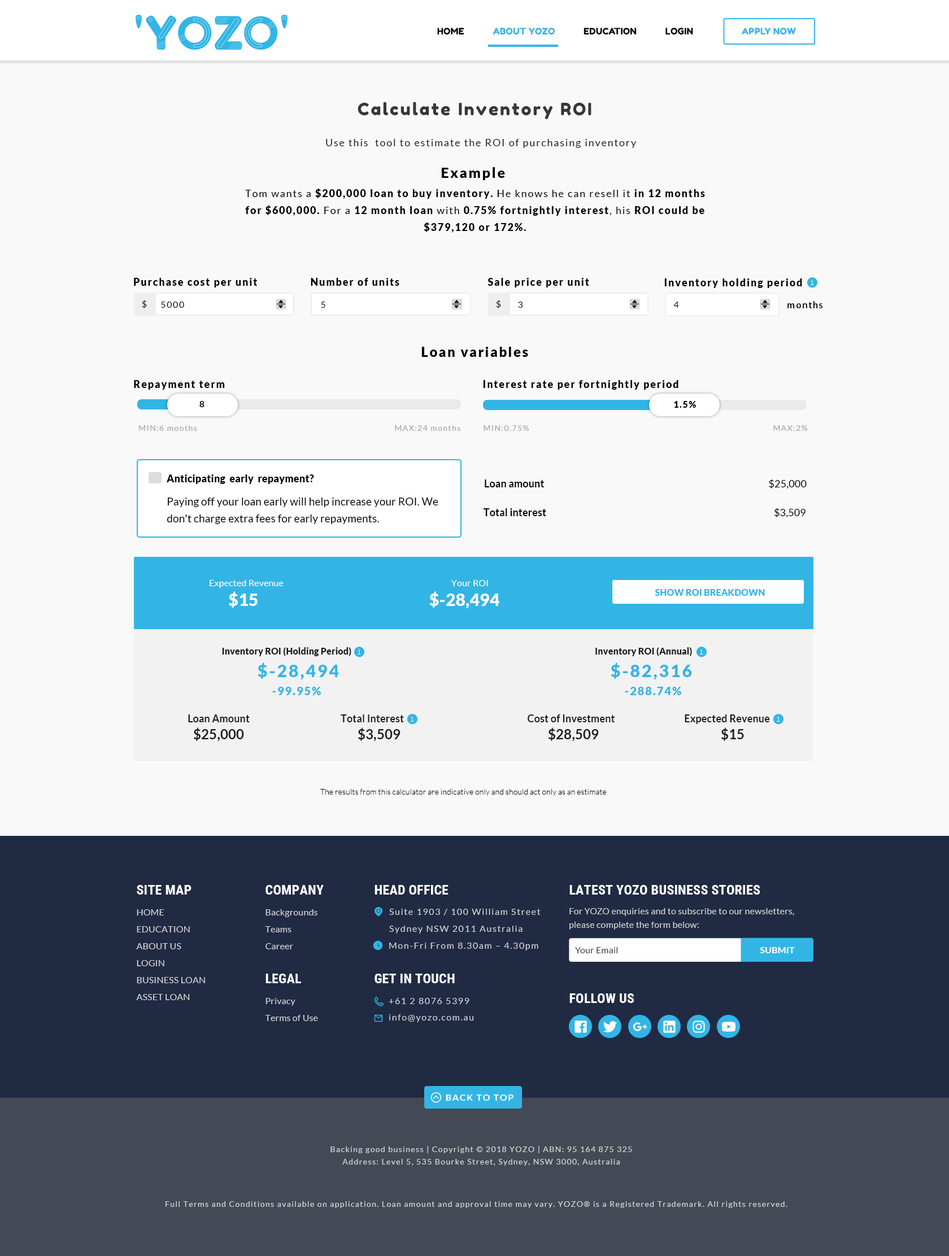
<style>
.page{position:relative;width:949px;height:1256px;background:#f9f9f9}
.page>*{position:absolute;margin:0}
.t1{font:9px "FredokaOne-Regular";letter-spacing:0.01em;color:#000000}
.t2{font:9px "FredokaOne-Regular";letter-spacing:0.01em;color:#32b5e5}
.t3{font:16.9px "FredokaOne-Regular";letter-spacing:0.1em;color:#373737}
.t4{font:10.2px "Lato-Regular";letter-spacing:0.1em;color:#1c1c1c}
.t5{font:14.1px "Lato-Black";letter-spacing:0.1em;color:#000000}
.t6{font:10.2px/16.9px "Lato-Black";letter-spacing:0.1em;color:#000000}
.t7{font:10.2px/16.9px "Lato-Regular";letter-spacing:0.1em;color:#000000}
.t8{font:10.2px "Lato-Black";letter-spacing:0.1em;color:#000000}
.t9{font:9px "Lato-Regular";letter-spacing:0.1em;color:#000000}
.t10{font:9px "AdobeHeitiStd-Regular";letter-spacing:0.1em;color:#000000}
.t11{font:13.6px "Lato-Black";letter-spacing:0.1em;color:#000000}
.t12{font:9px "Lato-Bold";letter-spacing:0.1em;color:#000000}
.t13{font:9px "Lato-Black";letter-spacing:0.1em;color:#000000}
.t14{font:7.9px "Lato-Regular";letter-spacing:0.1em;color:#a6a6a6}
.t15{font:10.2px "Lato-Black";letter-spacing:0.008em;color:#000000}
.t16{font:10.2px "Lato-Bold";letter-spacing:0.008em;color:#000000}
.t17{font:10.2px "Lato-Regular";letter-spacing:0.008em;color:#000000}
.t18{font:10.7px/16.9px "Lato-Regular";letter-spacing:0.008em;color:#000000}
.t19{font:9px "Lato-Regular";letter-spacing:0.008em;color:#ffffff}
.t20{font:16.9px "Lato-Black";letter-spacing:0.008em;color:#ffffff}
.t21{font:9px "Lato-Black";letter-spacing:0.008em;color:#32b5e5}
.t22{font:9px "Lato-Black";letter-spacing:0.008em;color:#1c1c1c}
.t23{font:16.9px "Lato-Black";letter-spacing:0.1em;color:#32b5e5}
.t24{font:11.3px "Lato-Black";letter-spacing:0.1em;color:#32b5e5}
.t25{font:10.2px "Lato-Bold";letter-spacing:0.008em;color:#1c1c1c}
.t26{font:13.6px "Lato-Bold";letter-spacing:0.008em;color:#1c1c1c}
.t27{font:7.9px "Lato-Light";letter-spacing:0.008em;color:#000000}
.t28{font:13.6px "RobotoCondensed-Bold";letter-spacing:0.01em;color:#ffffff}
.t29{font:13.6px "RobotoCondensed-Bold";letter-spacing:0.01em;color:#fffefe}
.t30{font:9px/16.9px "Lato-Regular";letter-spacing:0.01em;color:#d0d0d0}
.t31{font:9px/16.9px "Lato-Regular";letter-spacing:0.1em;color:#d0d0d0}
.t32{font:9px/13.6px "Lato-Regular";letter-spacing:0.01em;color:#d0d0d0}
.t33{font:9px "Lato-Regular";letter-spacing:0.1em;color:#d0d0d0}
.t34{font:9px "Lato-Regular";letter-spacing:0.01em;color:#414141}
.t35{font:9px "Lato-Bold";letter-spacing:0.01em;color:#ffffff}
.t36{font:9px "Lato-Bold";letter-spacing:0.1em;color:#ffffff}
.t37{font:7.9px/12.4px "Lato-Regular";letter-spacing:0.1em;color:#d0d0d0}
.t38{font:7.9px "Lato-Regular";letter-spacing:0.1em;color:#d0d0d0}
</style>
<div class="page">
<p class="t1" style="left:437px;top:28px;width:256px;height:7px">HOME            <span class="t2">ABOUT YOZO    </span>        EDUCATION            LOGIN</p>
<p class="t2" style="left:742px;top:28px;width:54px;height:7px">APPLY NOW</p>
<p class="t3" style="left:358px;top:102px;width:233px;height:17px">Calculate Inventory ROI</p>
<p class="t4" style="left:326px;top:139px;width:310px;height:9px">Use this  tool to estimate the ROI of purchasing inventory</p>
<p class="t5" style="left:442px;top:167px;width:63px;height:13px">Example</p>
<p class="t6" style="left:245px;top:188px;width:460px;height:45px;text-align:center"><span class="t7">Tom wants a </span>$200,000 loan to buy inventory.<span class="t7"> He knows he can resell it </span>in 12 months<br>for $600,000. <span class="t7">For a </span>12 month loan<span class="t7"> with </span>0.75% fortnightly interest<span class="t7">, his </span>ROI could be<br>$379,120 or 172%.</p>
<p class="t8" style="left:134px;top:278px;width:124px;height:10px">Purchase cost per unit</p>
<p class="t8" style="left:311px;top:278px;width:88px;height:8px">Number of units</p>
<p class="t8" style="left:488px;top:278px;width:101px;height:10px">Sale price per unit</p>
<p class="t8" style="left:664px;top:279px;width:138px;height:9px">Inventory holding period</p>
<p class="t9" style="left:142px;top:300px;width:5px;height:8px">$</p>
<p class="t9" style="left:161px;top:302px;width:23px;height:6px">5000</p>
<p class="t9" style="left:321px;top:302px;width:4px;height:6px">5</p>
<p class="t9" style="left:496px;top:300px;width:5px;height:8px">$</p>
<p class="t9" style="left:518px;top:302px;width:5px;height:6px">3</p>
<p class="t9" style="left:673px;top:302px;width:6px;height:6px">4</p>
<p class="t10" style="left:788px;top:301px;width:35px;height:7px">months</p>
<p class="t11" style="left:421px;top:347px;width:107px;height:10px">Loan variables</p>
<p class="t8" style="left:134px;top:380px;width:91px;height:10px">Repayment term</p>
<p class="t8" style="left:483px;top:380px;width:195px;height:10px">Interest rate per fortnightly period</p>
<p class="t12" style="left:199px;top:401px;width:6px;height:6px">8</p>
<p class="t13" style="left:674px;top:401px;width:22px;height:7px">1.5%</p>
<p class="t14" style="left:139px;top:425px;width:58px;height:6px">MIN:6 months</p>
<p class="t14" style="left:395px;top:425px;width:65px;height:6px">MAX:24 months</p>
<p class="t14" style="left:484px;top:425px;width:45px;height:6px">MIN:0.75%</p>
<p class="t14" style="left:773px;top:425px;width:35px;height:6px">MAX:2%</p>
<p class="t15" style="left:167px;top:475px;width:147px;height:9px">Anticipating  early  repayment?</p>
<p class="t16" style="left:485px;top:480px;width:59px;height:8px">Loan amount</p>
<p class="t17" style="left:769px;top:480px;width:38px;height:9px">$25,000</p>
<p class="t18" style="left:167px;top:498px;width:271px;height:26px">Paying off your loan early will help increase your ROI. We<br>don't charge extra fees for early repayments.</p>
<p class="t16" style="left:484px;top:508px;width:62px;height:8px">Total interest</p>
<p class="t17" style="left:775px;top:508px;width:31px;height:10px">$3,509</p>
<p class="t19" style="left:210px;top:580px;width:74px;height:8px">Expected Revenue</p>
<p class="t19" style="left:451px;top:580px;width:37px;height:6px">Your ROI</p>
<p class="t20" style="left:229px;top:591px;width:29px;height:17px">$15</p>
<p class="t20" style="left:429px;top:591px;width:70px;height:18px">$-28,494</p>
<p class="t21" style="left:655px;top:589px;width:110px;height:7px">SHOW ROI BREAKDOWN</p>
<p class="t22" style="left:222px;top:647px;width:129px;height:9px">Inventory ROI (Holding Period)</p>
<p class="t22" style="left:595px;top:647px;width:97px;height:9px">Inventory ROI (Annual)</p>
<p class="t23" style="left:258px;top:663px;width:81px;height:17px">$-28,494</p>
<p class="t23" style="left:611px;top:663px;width:81px;height:17px">$-82,316</p>
<p class="t24" style="left:272px;top:687px;width:49px;height:8px">-99.95%</p>
<p class="t24" style="left:625px;top:687px;width:56px;height:8px">-288.74%</p>
<p class="t25" style="left:188px;top:715px;width:62px;height:8px">Loan Amount</p>
<p class="t25" style="left:341px;top:715px;width:63px;height:8px">Total Interest</p>
<p class="t25" style="left:528px;top:715px;width:87px;height:8px">Cost of Investment</p>
<p class="t25" style="left:685px;top:715px;width:85px;height:9px">Expected Revenue</p>
<p class="t26" style="left:194px;top:728px;width:50px;height:14px">$25,000</p>
<p class="t26" style="left:358px;top:728px;width:43px;height:14px">$3,509</p>
<p class="t26" style="left:549px;top:728px;width:50px;height:14px">$28,509</p>
<p class="t26" style="left:721px;top:728px;width:23px;height:13px">$15</p>
<p class="t27" style="left:320px;top:789px;width:287px;height:7px">The results from this calculator are indicative only and should act only as an estimate</p>
<p class="t28" style="left:137px;top:885px;width:55px;height:10px">SITE MAP</p>
<p class="t28" style="left:266px;top:885px;width:58px;height:10px">COMPANY</p>
<p class="t28" style="left:375px;top:885px;width:74px;height:10px">HEAD OFFICE</p>
<p class="t29" style="left:569px;top:885px;width:191px;height:10px">LATEST YOZO BUSINESS STORIES</p>
<p class="t30" style="left:136px;top:910px;width:69px;height:90px">HOME<br>EDUCATION<br>ABOUT US<br>LOGIN<br>BUSINESS LOAN<br>ASSET LOAN</p>
<p class="t30" style="left:265px;top:910px;width:52px;height:40px">Backgrounds<br>Teams<br>Career</p>
<p class="t31" style="left:389px;top:909px;width:152px;height:25px">Suite 1903 / 100 William Street<br>Sydney NSW 2011 Australia</p>
<p class="t32" style="left:569px;top:908px;width:225px;height:22px">For YOZO enquiries and to subscribe to our newsletters, <br>please complete the form below:</p>
<p class="t33" style="left:389px;top:943px;width:149px;height:8px">Mon-Fri From 8.30am – 4.30pm</p>
<p class="t34" style="left:575px;top:947px;width:43px;height:7px">Your Email</p>
<p class="t35" style="left:760px;top:947px;width:35px;height:7px">SUBMIT</p>
<p class="t28" style="left:266px;top:974px;width:35px;height:10px">LEGAL</p>
<p class="t28" style="left:375px;top:974px;width:80px;height:10px">GET IN TOUCH</p>
<p class="t30" style="left:265px;top:998px;width:53px;height:23px">Privacy<br>Terms of Use</p>
<p class="t33" style="left:389px;top:998px;width:80px;height:6px">+61 2 8076 5399</p>
<p class="t29" style="left:569px;top:994px;width:65px;height:9px">FOLLOW US</p>
<p class="t33" style="left:389px;top:1015px;width:85px;height:8px">info@yozo.com.au</p>
<p class="t36" style="left:446px;top:1095px;width:68px;height:6px">BACK TO TOP</p>
<p class="t37" style="left:330px;top:1146px;width:302px;height:20px;text-align:center">Backing good business | Copyright © 2018 YOZO | ABN: 95 164 875 325<br>Address: Level 5, 535 Bourke Street, Sydney, NSW 3000, Australia</p>
<p class="t38" style="left:166px;top:1202px;width:622px;height:6px">Full Terms and Conditions available on application. Loan amount and approval time may vary. YOZO® is a Registered Trademark. All rights reserved.</p>
</div>
